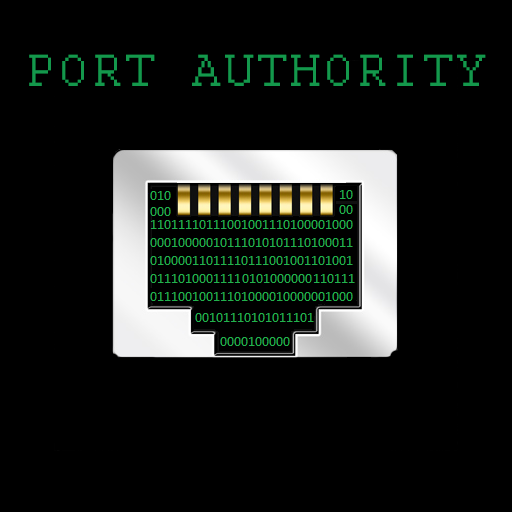
<style>
.page{position:relative;width:512px;height:512px;background:#000000}
.page>*{position:absolute;margin:0}
.t1{font:50px "Courier";letter-spacing:0.1em;color:#14984c}
</style>
<div class="page">
<p class="t1" style="left:29px;top:54px;width:457px;height:32px">PORT AUTHORITY</p>
</div>
